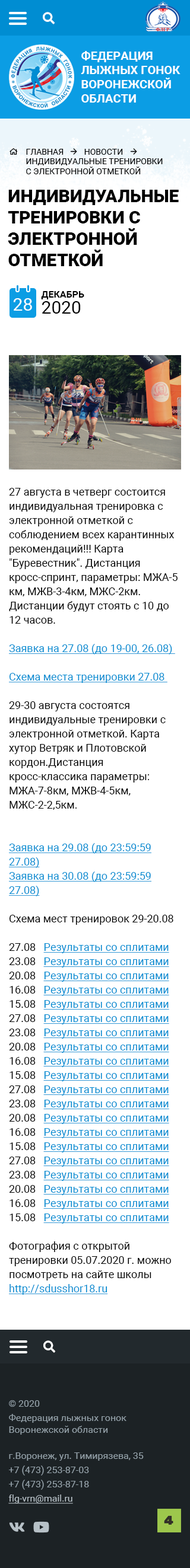
<style>
.page{position:relative;width:190px;height:1568px;background:#ffffff}
.page>*{position:absolute;margin:0}
.t1{font:11.9px "Roboto-Bold";color:#ffffff;text-transform:uppercase}
.t2{font:8.3px "Roboto-Regular";color:#000000;text-transform:uppercase}
.t3{font:17.8px "Roboto-Black";color:#000000;text-transform:uppercase}
.t4{font:9.5px "Roboto-Bold";color:#000000;text-transform:uppercase}
.t5{font:17.8px "Roboto-Regular";color:#ffffff;text-transform:uppercase}
.t6{font:17.8px "Roboto-Regular";color:#000000;text-transform:uppercase}
.t7{font:10.7px/14.2px "Roboto-Regular";color:#000000}
.t8{font:10.7px/14.2px "Roboto-Regular";color:#008dd2;text-decoration:underline}
.t9{font:9.5px/14.2px "Roboto-Regular";color:#94a1a9}
.t10{font:9.5px/11.9px "Roboto-Regular";color:#94a1a9}
.t11{font:9.5px/14.2px "Roboto-Regular";color:#b7c1c7;text-decoration:underline}
</style>
<div class="page">
<p class="t1" style="left:81px;top:51px;width:99px;height:52px">ФЕДЕРАЦИЯ <br>ЛЫЖНЫХ ГОНОК<br>воронежской <br>области</p>
<p class="t2" style="left:26px;top:149px;width:136px;height:25px">Главная          Новости          <br>Индивидуальные тренировки <br>с электронной отметкой</p>
<p class="t3" style="left:8px;top:190px;width:170px;height:76px">Индивидуальные <br>тренировки с <br>электронной <br>отметкой</p>
<p class="t4" style="left:41px;top:291px;width:43px;height:8px">декабрь</p>
<p class="t5" style="left:13px;top:298px;width:19px;height:13px">28</p>
<p class="t6" style="left:41px;top:301px;width:40px;height:13px">2020</p>
<p class="t7" style="left:9px;top:488px;width:168px;height:807px">27 августа в четверг состоится индивидуальная тренировка с электронной отметкой с соблюдением всех карантинных рекомендаций!!! Карта "Буревестник". Дистанция кросс-спринт, параметры: МЖА-5км, МЖВ-3-4км, МЖС-2км. Дистанции будут стоять с 10 до 12 часов. <br><br><span class="t8">Заявка на 27.08 (до 19-00, 26.08) <br><br>Схема места тренировки 27.08 <br></span><br>29-30 августа состоятся индивидуальные тренировки с электронной отметкой. Карта хутор Ветряк и Плотовской кордон.Дистанция кросс-классика параметры: МЖА-7-8км, МЖВ-4-5км, МЖС-2-2,5км.<br><br><br><span class="t8">Заявка на 29.08 (до 23:59:59 27.08)<br>Заявка на 30.08 (до 23:59:59 27.08)<br></span><br>Схема мест тренировок 29-20.08<br><br>27.08   <span class="t8">Результаты со сплитами<br></span>23.08   <span class="t8">Результаты со сплитами<br></span>20.08   <span class="t8">Результаты со сплитами<br></span>16.08   <span class="t8">Результаты со сплитами<br></span>15.08   <span class="t8">Результаты со сплитами<br></span>27.08   <span class="t8">Результаты со сплитами<br></span>23.08   <span class="t8">Результаты со сплитами<br></span>20.08   <span class="t8">Результаты со сплитами<br></span>16.08   <span class="t8">Результаты со сплитами<br></span>15.08   <span class="t8">Результаты со сплитами<br></span>27.08   <span class="t8">Результаты со сплитами<br></span>23.08   <span class="t8">Результаты со сплитами<br></span>20.08   <span class="t8">Результаты со сплитами<br></span>16.08   <span class="t8">Результаты со сплитами<br></span>15.08   <span class="t8">Результаты со сплитами<br></span>27.08   <span class="t8">Результаты со сплитами<br></span>23.08   <span class="t8">Результаты со сплитами<br></span>20.08   <span class="t8">Результаты со сплитами<br></span>16.08   <span class="t8">Результаты со сплитами<br></span>15.08   <span class="t8">Результаты со сплитами<br></span><br>Фотография с открытой тренировки 05.07.2020 г. можно посмотреть на сайте школы <span class="t8">http://sdusshor18.ru</span></p>
<p class="t9" style="left:9px;top:1400px;width:117px;height:35px">© 2020 <br>Федерация лыжных гонок <br><span class="t10">Воронежской области</span></p>
<p class="t9" style="left:8px;top:1452px;width:135px;height:52px">г.Воронеж, ул. Тимирязева, 35<br>+7 (473) 253-87-03<br>+7 (473) 253-87-18<br><span class="t11">flg-vrn@mail.ru</span></p>
</div>
